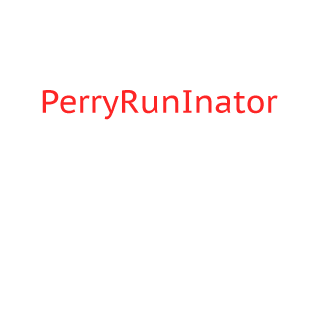
<style>
.page{position:relative;width:320px;height:320px;background:#ffffff}
.page>*{position:absolute;margin:0}
.t1{font:32px "PTSans-Caption";color:#fd2525}
</style>
<div class="page">
<p class="t1" style="left:42px;top:90px;width:236px;height:30px">PerryRunInator</p>
</div>
